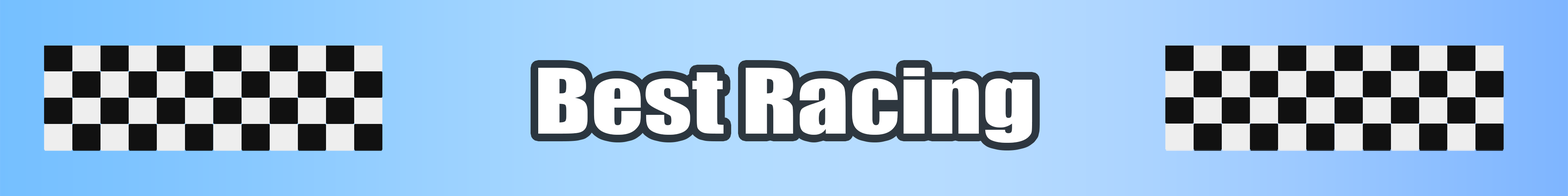
<style>
.page{position:relative;width:1568px;height:196px}
.page>*{position:absolute;margin:0}
.t1{font:83.4px "Impact";color:#ffffff;scale:1.24 1}
</style>
<div class="page">
<p class="t1" style="left:538px;top:68px;width:494px;height:75px">Best Racing</p>
</div>
